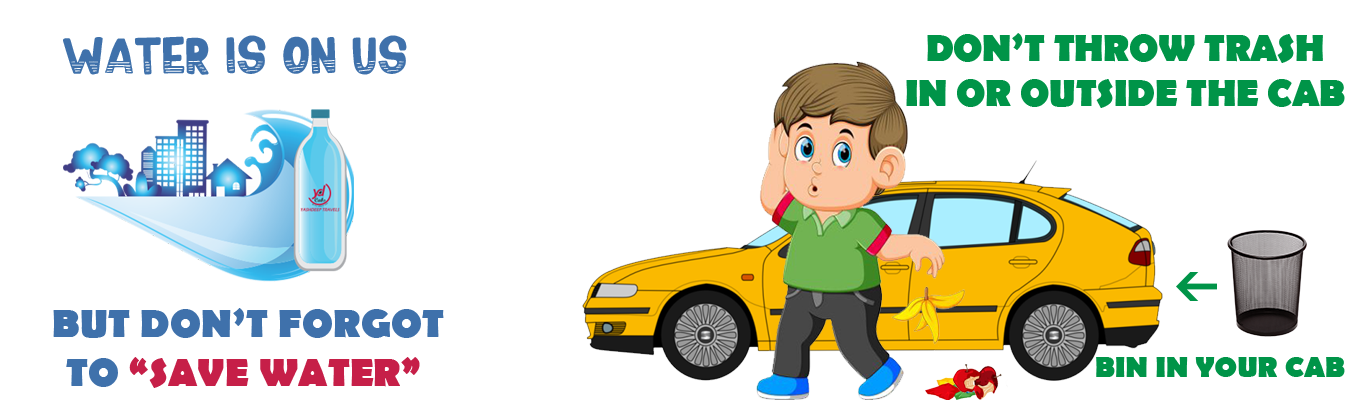
<style>
.page{position:relative;width:1349px;height:400px;background:#ffffff}
.page>*{position:absolute;margin:0}
.t1{font:41.7px "WavepoolRegular";color:#3f71ab;text-transform:uppercase}
.t2{font:37.5px "BerlinSansFB-Bold";color:#009448;text-transform:uppercase}
.t3{font:40.3px "BerlinSansFB-Bold";color:#3f71ab;text-transform:uppercase}
.t4{font:40.3px "BerlinSansFB-Bold";color:#c61f48;text-transform:uppercase}
.t5{font:29.2px "BerlinSansFB-Bold";color:#009448;text-transform:uppercase}
</style>
<div class="page">
<p class="t1" style="left:63px;top:35px;width:344px;height:40px">Water is on us</p>
<p class="t2" style="left:906px;top:33px;width:439px;height:75px;text-align:center">Don’t throw trash<br>in or outside THE cab</p>
<p class="t3" style="left:53px;top:308px;width:391px;height:80px;text-align:center">But don’t forgot<br>to <span class="t4">“save water”</span></p>
<p class="t5" style="left:1096px;top:357px;width:249px;height:20px">BIn In your cab</p>
</div>
